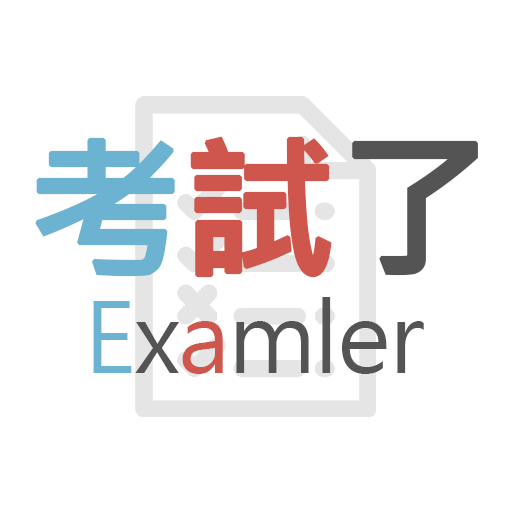
<style>
.page{position:relative;width:512px;height:512px;background:#ffffff}
.page>*{position:absolute;margin:0}
.t1{font:154px "MicrosoftJhengHeiBold";letter-spacing:-0.02em;color:#6bb3d0;font-weight:bold}
.t2{font:154px "MicrosoftJhengHeiBold";letter-spacing:-0.02em;color:#cf564c;font-weight:bold}
.t3{font:154px "MicrosoftJhengHeiBold";letter-spacing:-0.02em;color:#545454;font-weight:bold}
.t4{font:95px "MicrosoftJhengHeiRegular";letter-spacing:-0.02em;color:#545454}
.t5{font:95px "MicrosoftJhengHeiRegular";letter-spacing:-0.02em;color:#6bb3d0}
.t6{font:95px "MicrosoftJhengHeiRegular";letter-spacing:-0.02em;color:#cf564c}
</style>
<div class="page">
<p class="t1" style="left:35px;top:136px;width:443px;height:142px">考<span class="t2">試</span><span class="t3">了</span></p>
<p class="t4" style="left:93px;top:297px;width:331px;height:77px"><span class="t5">E</span>x<span class="t6">a</span>mler</p>
</div>
